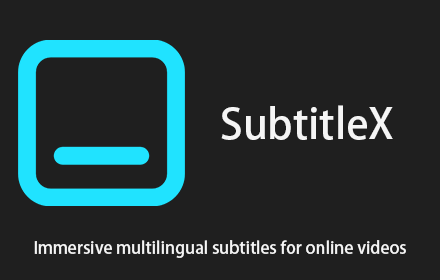
<style>
.page{position:relative;width:440px;height:280px;background:#1f1f1f}
.page>*{position:absolute;margin:0}
.t1{font:41.7px "AdobeHeitiStd-Regular";color:#f5f5f5}
.t2{font:16.7px "AdobeHeitiStd-Regular";color:#f5f5f5}
</style>
<div class="page">
<p class="t1" style="left:221px;top:105px;width:172px;height:35px">SubtitleX</p>
<p class="t2" style="left:34px;top:240px;width:372px;height:18px">Immersive multilingual subtitles for online videos</p>
</div>
